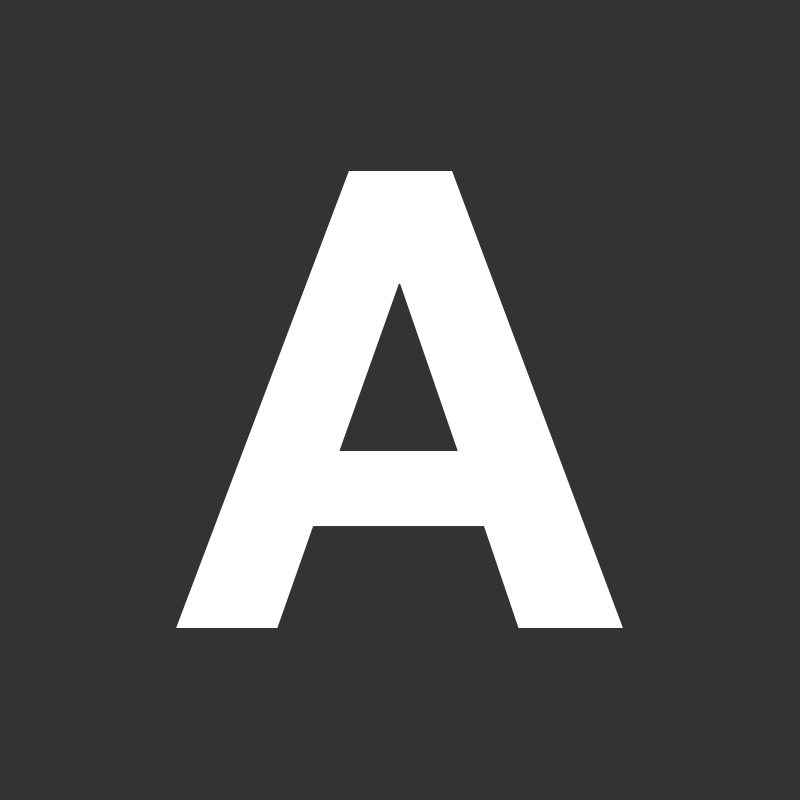
<style>
.page{position:relative;width:800px;height:800px;background:#333333}
.page>*{position:absolute;margin:0}
.t1{font:640px "HelveticaNeue-Bold";color:#ffffff}
</style>
<div class="page">
<p class="t1" style="left:176px;top:171px;width:447px;height:457px">A</p>
</div>
